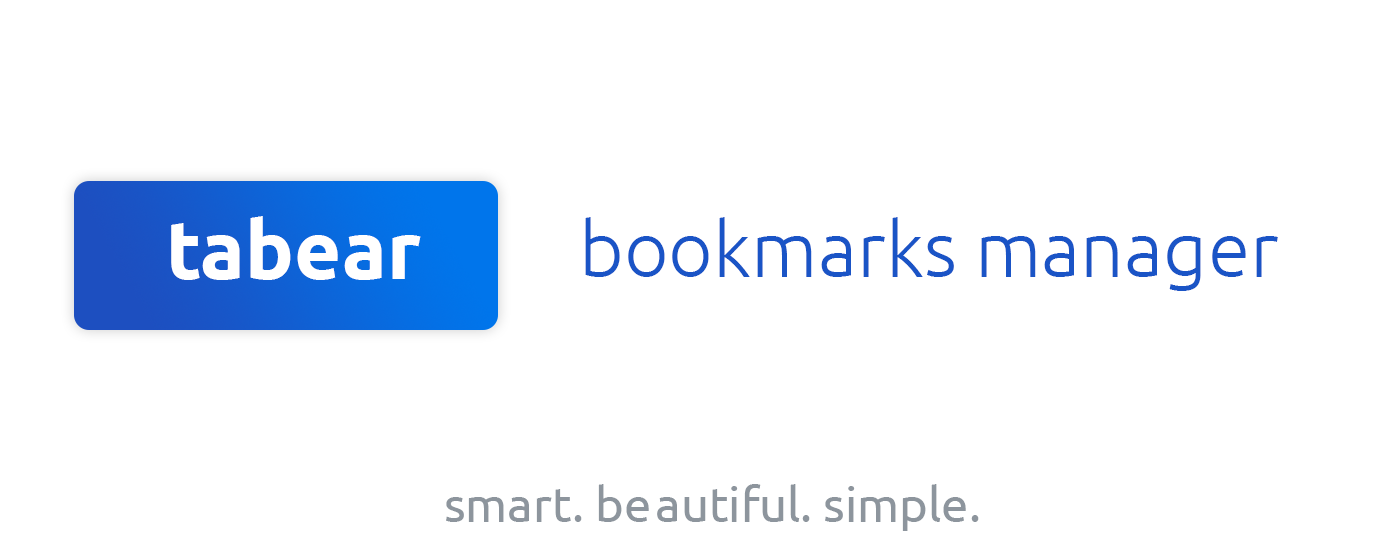
<style>
.page{position:relative;width:1400px;height:560px;background:#ffffff}
.page>*{position:absolute;margin:0}
.t1{font:81.4px "Ubuntu-Bold";color:#ffffff}
.t2{font:77.1px "Ubuntu-Light";color:#1a54c6}
.t3{font:48.8px "Ubuntu";color:#8d959d}
</style>
<div class="page">
<p class="t1" style="left:171px;top:216px;width:250px;height:64px">tabear</p>
<p class="t2" style="left:585px;top:217px;width:693px;height:74px">bookmarks manager</p>
<p class="t3" style="left:446px;top:484px;width:533px;height:47px">smart. beautiful. simple.</p>
</div>
